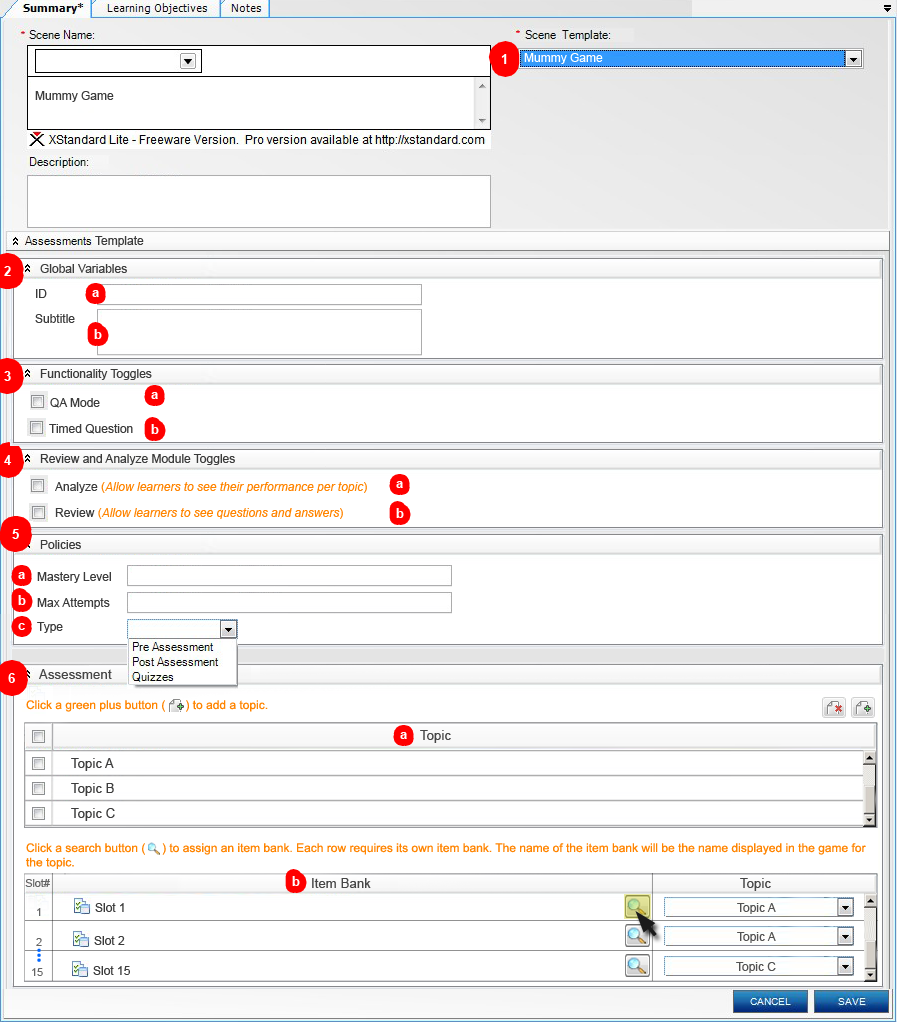
<style>
.page{position:relative;width:897px;height:1022px;background:#ffffff}
.page>*{position:absolute;margin:0}
.t1{font:13.3px "Arial-BoldMT";color:#ffffff}
.t2{font:12px "ArialMT";color:#ffffff}
.t3{font:12px "ArialMT";color:#3b3b3b}
.t4{font:12px "Arial-ItalicMT";color:#ff8400}
.t5{font:12px "ArialMT";color:#ff8400}
.t6{font:13.3px "ArialMT";color:#464646}
.t7{font:13.3px "ArialMT";color:#3d3d3d}
.t8{font:10.7px/29.3px "ArialMT";color:#646464}
.t9{font:12px/29.3px "ArialMT";color:#525252}
.t10{font:10.7px "ArialMT";color:#646464}
</style>
<div class="page">
<p class="t1" style="left:501px;top:54px;width:6px;height:10px">1</p>
<p class="t2" style="left:524px;top:53px;width:79px;height:11px">Mummy Game</p>
<p class="t3" style="left:35px;top:91px;width:79px;height:11px">Mummy Game</p>
<p class="t3" style="left:95px;top:236px;width:49px;height:11px">Template</p>
<p class="t1" style="left:4px;top:266px;width:7px;height:10px">2</p>
<p class="t3" style="left:40px;top:264px;width:87px;height:9px">Global Variables</p>
<p class="t3" style="left:36px;top:289px;width:11px;height:9px">ID</p>
<p class="t1" style="left:92px;top:290px;width:7px;height:7px">a</p>
<p class="t3" style="left:35px;top:314px;width:40px;height:9px">Subtitle</p>
<p class="t1" style="left:94px;top:329px;width:8px;height:10px">b</p>
<p class="t1" style="left:4px;top:371px;width:7px;height:10px">3</p>
<p class="t3" style="left:40px;top:369px;width:112px;height:11px">Functionality Toggles</p>
<p class="t3" style="left:50px;top:398px;width:50px;height:10px">QA Mode</p>
<p class="t1" style="left:151px;top:392px;width:7px;height:7px">a</p>
<p class="t3" style="left:49px;top:424px;width:84px;height:10px">Timed Question</p>
<p class="t1" style="left:151px;top:424px;width:8px;height:10px">b</p>
<p class="t1" style="left:4px;top:455px;width:8px;height:10px">4</p>
<p class="t3" style="left:40px;top:454px;width:195px;height:11px">Review and Analyze Module Toggles</p>
<p class="t4" style="left:55px;top:482px;width:312px;height:11px"><span class="t3">Analyze </span><span class="t5">(</span>Allow learners to see their performance per topic<span class="t5">)</span></p>
<p class="t1" style="left:396px;top:481px;width:7px;height:7px">a</p>
<p class="t4" style="left:55px;top:508px;width:288px;height:11px"><span class="t3">Review </span><span class="t5">(</span>Allow learners to see questions and answers<span class="t5">)</span></p>
<p class="t1" style="left:396px;top:508px;width:8px;height:10px">b</p>
<p class="t1" style="left:12px;top:529px;width:7px;height:10px">5</p>
<p class="t3" style="left:40px;top:540px;width:41px;height:9px">Policies</p>
<p class="t1" style="left:18px;top:572px;width:7px;height:7px">a</p>
<p class="t3" style="left:37px;top:572px;width:74px;height:11px">Mastery Level</p>
<p class="t1" style="left:18px;top:595px;width:8px;height:10px">b</p>
<p class="t3" style="left:37px;top:598px;width:73px;height:11px">Max Attempts</p>
<p class="t1" style="left:18px;top:623px;width:7px;height:7px">c</p>
<p class="t3" style="left:37px;top:622px;width:26px;height:11px">Type</p>
<p class="t1" style="left:8px;top:673px;width:7px;height:10px">6</p>
<p class="t6" style="left:39px;top:669px;width:73px;height:10px">Assessment</p>
<p class="t5" style="left:26px;top:700px;width:242px;height:12px">Click a green plus button (      ) to add a topic.</p>
<p class="t1" style="left:400px;top:732px;width:7px;height:7px">a</p>
<p class="t6" style="left:420px;top:730px;width:31px;height:13px">Topic</p>
<p class="t7" style="left:71px;top:758px;width:43px;height:13px">Topic A</p>
<p class="t7" style="left:71px;top:783px;width:43px;height:13px">Topic B</p>
<p class="t7" style="left:71px;top:808px;width:44px;height:13px">Topic C</p>
<p class="t5" style="left:26px;top:843px;width:840px;height:26px">Click a search button (     ) to assign an item bank. Each row requires its own item bank. The name of the item bank will be the name displayed in the game for<br>the topic.</p>
<p class="t8" style="left:25px;top:879px;width:25px;height:67px;text-align:center">Slot# <br>1<br>2</p>
<p class="t1" style="left:292px;top:876px;width:8px;height:10px">b</p>
<p class="t6" style="left:312px;top:878px;width:59px;height:10px">Item Bank</p>
<p class="t6" style="left:740px;top:878px;width:31px;height:13px">Topic</p>
<p class="t3" style="left:95px;top:903px;width:29px;height:9px">Slot 1</p>
<p class="t9" style="left:736px;top:903px;width:40px;height:70px;text-align:center">Topic A<br>Topic A<br>Topic C</p>
<p class="t3" style="left:94px;top:936px;width:31px;height:9px">Slot 2</p>
<p class="t3" style="left:93px;top:966px;width:37px;height:9px">Slot 15</p>
<p class="t10" style="left:32px;top:968px;width:11px;height:8px">15</p>
</div>
